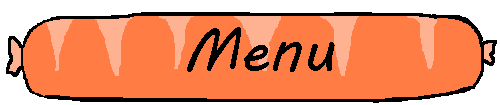
<style>
.page{position:relative;width:500px;height:105px;background:#ff7c44}
.page>*{position:absolute;margin:0}
.t1{font:60px "MVBoli";color:#000000}
</style>
<div class="page">
<p class="t1" style="left:187px;top:27px;width:148px;height:45px">Menu</p>
</div>
